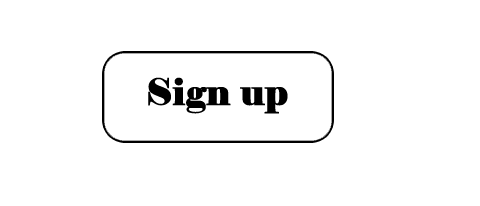
<style>
.page{position:relative;width:480px;height:206px;background:#ffffff}
.page>*{position:absolute;margin:0}
.t1{font:36px "Elephant-Regular";color:#000000;font-weight:bold}
</style>
<div class="page">
<p class="t1" style="left:148px;top:77px;width:140px;height:37px">Sign up</p>
</div>
